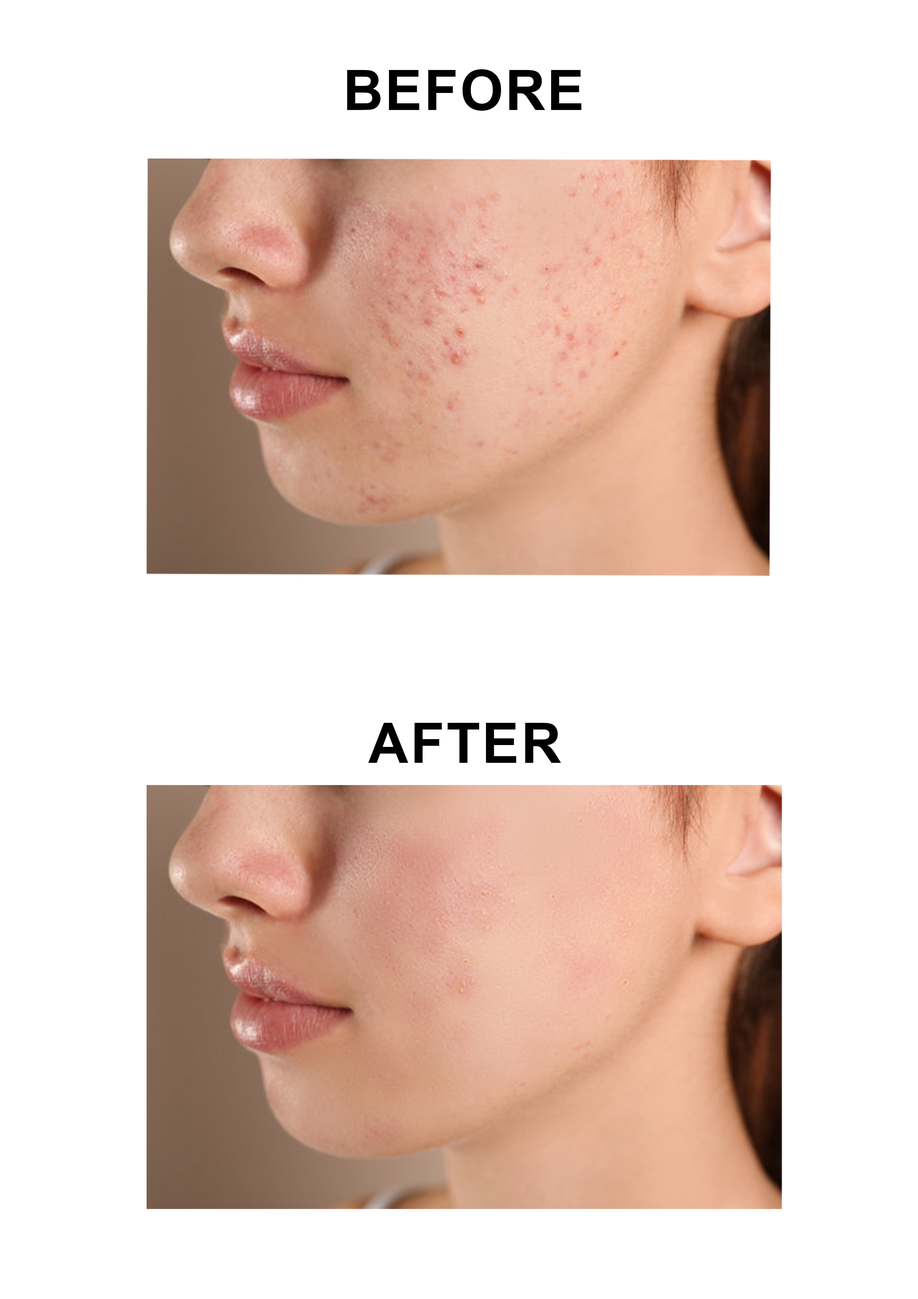
<style>
.page{position:relative;width:918px;height:1299px;background:#ffffff}
.page>*{position:absolute;margin:0}
.t1{font:55.5px "Arial-BoldMT";color:#000000;text-transform:uppercase}
</style>
<div class="page">
<p class="t1" style="left:347px;top:69px;width:235px;height:42px">before</p>
<p class="t1" style="left:368px;top:723px;width:193px;height:40px">after</p>
</div>
